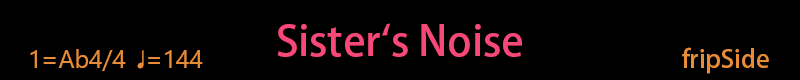
<style>
.page{position:relative;width:800px;height:80px;background:#000000}
.page>*{position:absolute;margin:0}
.t1{font:41.7px "AdobeHeitiStd-Regular";color:#f74877}
.t2{font:25px "SegoeUISymbol";color:#e98c38}
.t3{font:25px "AdobeHeitiStd-Regular";color:#e98c38}
</style>
<div class="page">
<p class="t1" style="left:277px;top:23px;width:245px;height:34px">Sister`s Noise</p>
<p class="t2" style="left:30px;top:47px;width:739px;height:27px">1=Ab4/4 ♩=144              <span class="t3"> fripSide</span></p>
</div>
